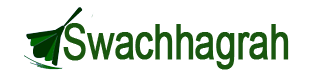
<style>
.page{position:relative;width:320px;height:80px;background:#ffffff}
.page>*{position:absolute;margin:0}
.t1{font:48.8px "ArialMT";letter-spacing:-0.02em;color:#19570f;font-weight:bold;scale:0.75 1}
</style>
<div class="page">
<p class="t1" style="left:63px;top:23px;width:226px;height:47px">Swachhagrah</p>
</div>
